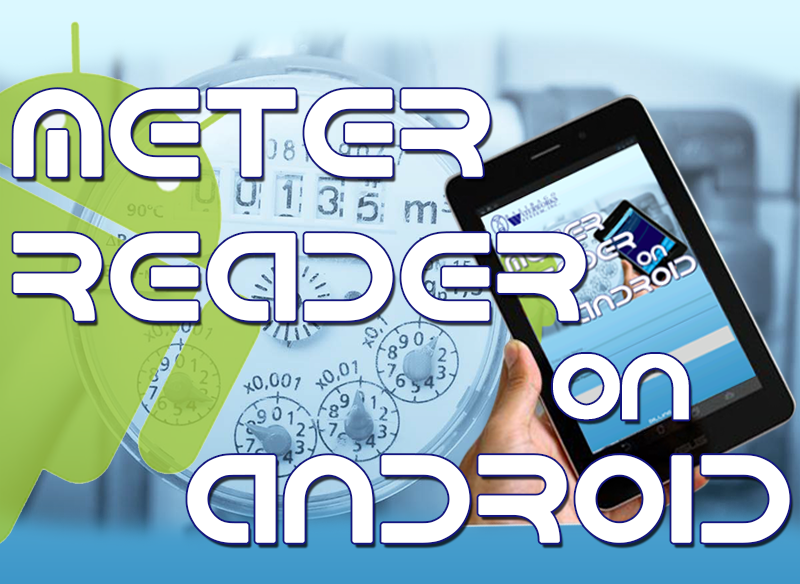
<style>
.page{position:relative;width:800px;height:584px}
.page>*{position:absolute;margin:0}
.t1{font:120px "Android";color:#ffffff;font-weight:bold}
.t2{font:91px "Android";letter-spacing:-0.05em;color:#ffffff;font-weight:bold}
</style>
<div class="page">
<p class="t1" style="left:13px;top:89px;width:573px;height:232px;text-align:right">METER<br>READER</p>
<p class="t2" style="left:553px;top:354px;width:136px;height:66px">on</p>
<p class="t1" style="left:187px;top:455px;width:603px;height:88px">ANDROID</p>
</div>
